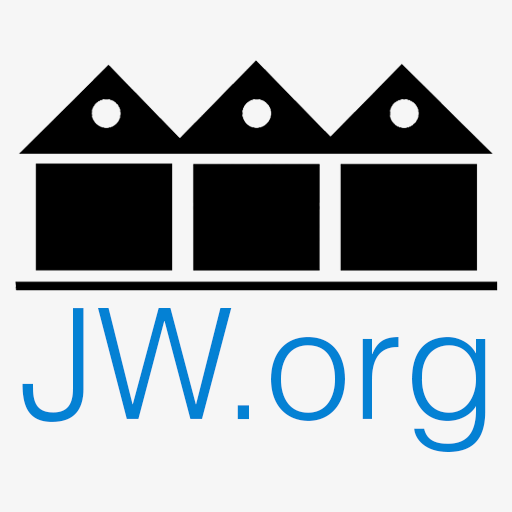
<style>
.page{position:relative;width:512px;height:512px;background:#f6f6f6}
.page>*{position:absolute;margin:0}
.t1{font:154.9px "Helvetica-Light";color:#0481d4}
</style>
<div class="page">
<p class="t1" style="left:22px;top:308px;width:464px;height:144px">JW.org</p>
</div>
